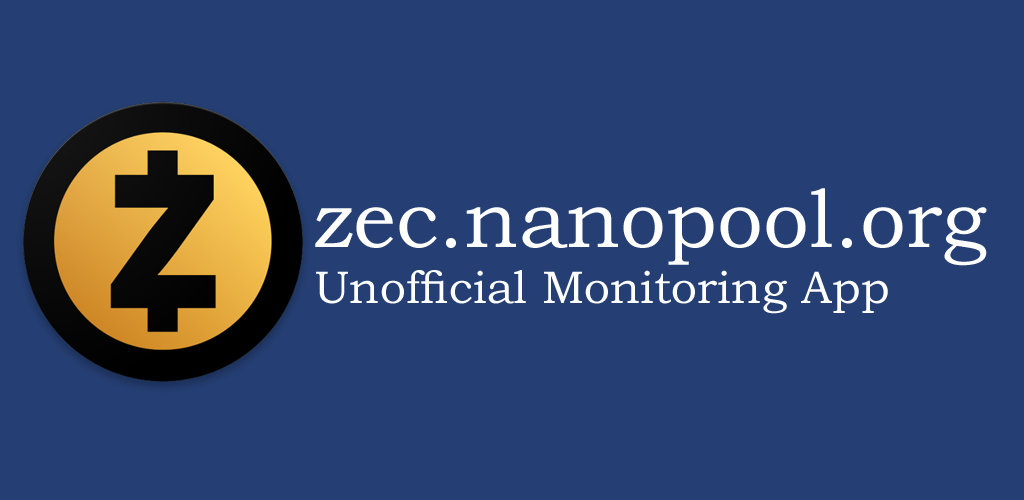
<style>
.page{position:relative;width:1024px;height:500px;background:#253f74}
.page>*{position:absolute;margin:0}
.t1{font:46px "BookmanOldStyle";color:#ffffff}
.t2{font:82px "BookmanOldStyle";color:#ffffff}
</style>
<div class="page">
<p class="t1" style="left:315px;top:188px;width:672px;height:126px"><span class="t2">zec.nanopool.org<br></span>Unofficial Monitoring App</p>
</div>
